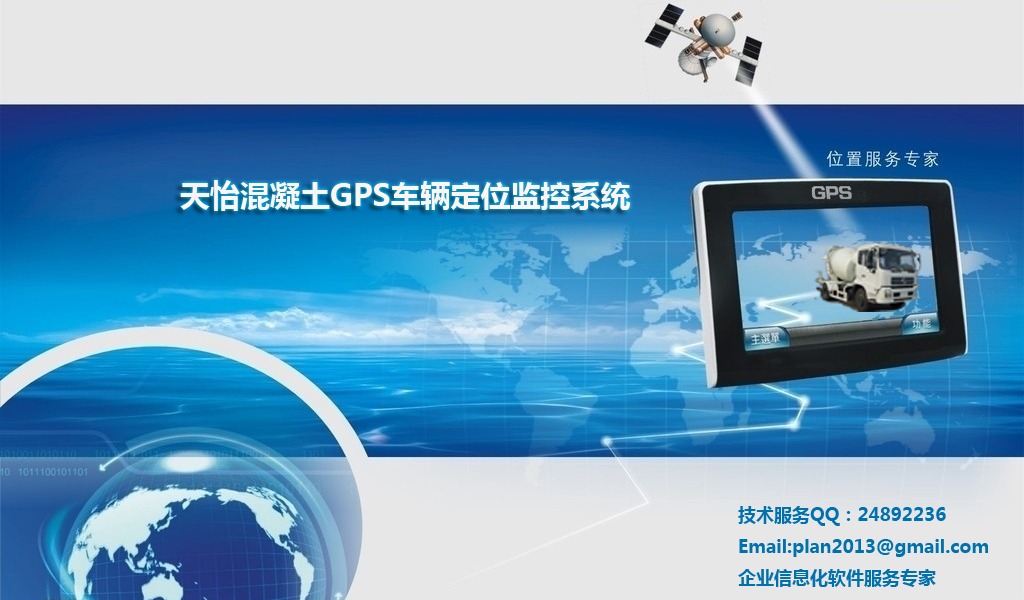
<style>
.page{position:relative;width:1024px;height:600px;background:#e7e7e7}
.page>*{position:absolute;margin:0}
.t1{font:30px "MicrosoftYaHei-Bold";color:#f9f1f1}
.t2{font:18px "MicrosoftYaHei-Bold";color:#0071ad}
</style>
<div class="page">
<p class="t1" style="left:180px;top:180px;width:451px;height:31px">天怡混凝土GPS车辆定位监控系统</p>
<p class="t2" style="left:738px;top:506px;width:250px;height:81px">技术服务QQ：24892236<br>Email:plan2013@gmail.com<br>企业信息化软件服务专家</p>
</div>
